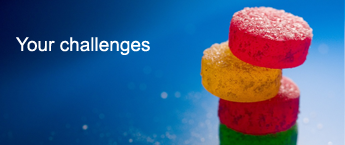
<style>
.page{position:relative;width:345px;height:145px}
.page>*{position:absolute;margin:0}
.t1{font:19px "ArialMT";color:#ffffff}
</style>
<div class="page">
<p class="t1" style="left:16px;top:37px;width:134px;height:18px">Your challenges</p>
</div>
